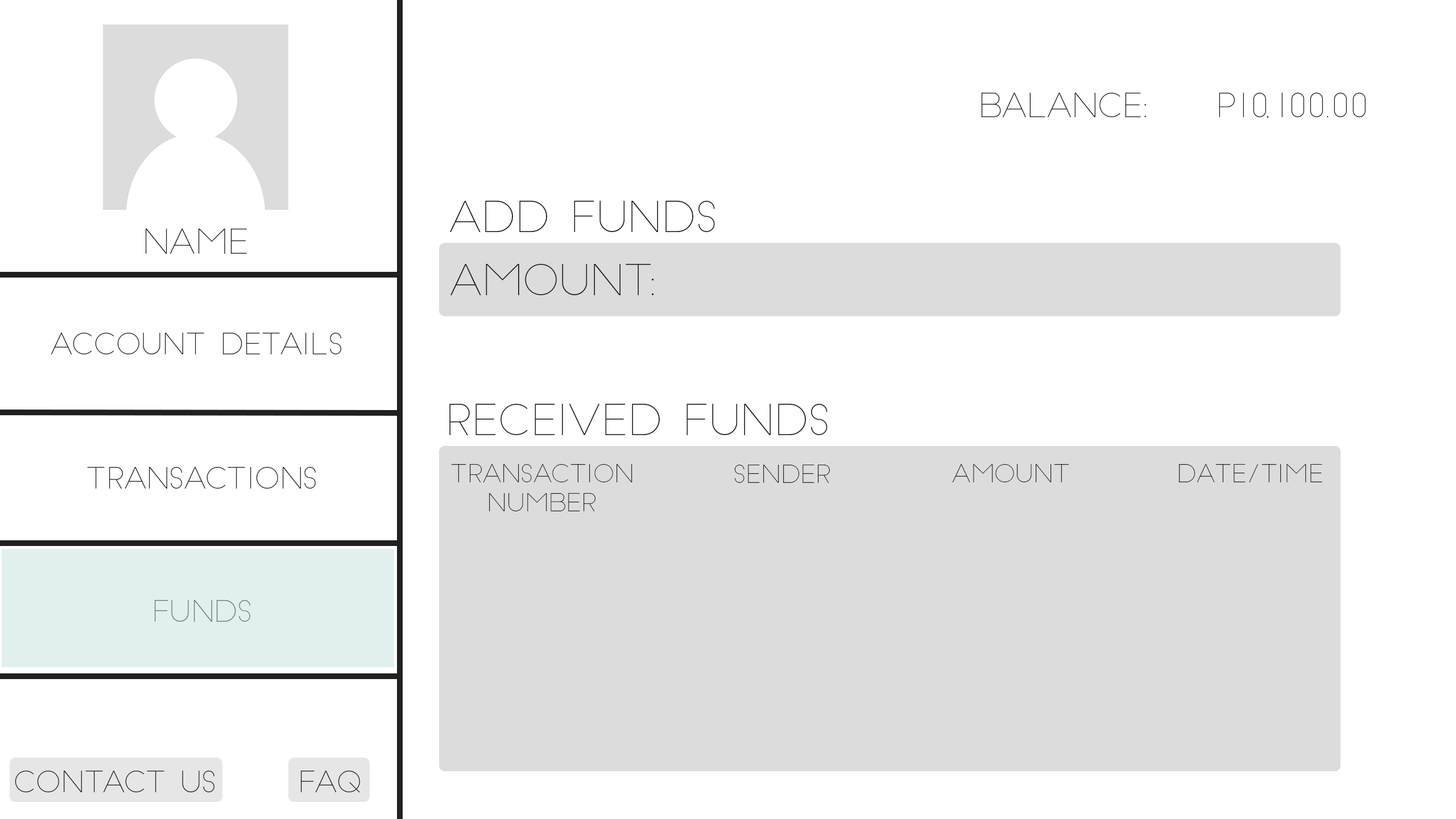
<style>
.page{position:relative;width:1456px;height:819px;background:#ffffff}
.page>*{position:absolute;margin:0}
.t1{font:32.3px "SlimJoe";color:#202020}
.t2{font:41.8px "SlimJoe";color:#202020}
.t3{font:24.2px "SlimJoe";color:#202020}
</style>
<div class="page">
<p class="t1" style="left:981px;top:93px;width:385px;height:25px">Balance:    P10,100.00</p>
<p class="t2" style="left:450px;top:200px;width:265px;height:32px">ADD FUNDS</p>
<p class="t2" style="left:450px;top:264px;width:204px;height:31px">AMOUNT:</p>
<p class="t2" style="left:449px;top:403px;width:379px;height:32px">RECEIVED FUNDS</p>
<p class="t3" style="left:451px;top:464px;width:181px;height:47px;text-align:center">transaction<br>number</p>
<p class="t3" style="left:734px;top:465px;width:96px;height:18px">SENDER</p>
<p class="t3" style="left:952px;top:464px;width:117px;height:18px">amount</p>
<p class="t3" style="left:1179px;top:464px;width:143px;height:18px">date/time</p>
</div>
